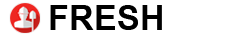
<style>
.page{position:relative;width:241px;height:35px;background:#ffffff}
.page>*{position:absolute;margin:0}
.t1{font:34px "Arial-BoldMT";letter-spacing:0.01em;color:#000000}
</style>
<div class="page">
<p class="t1" style="left:50px;top:5px;width:112px;height:25px">FRESH</p>
</div>
